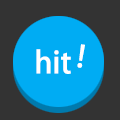
<style>
.page{position:relative;width:120px;height:120px;background:#333333}
.page>*{position:absolute;margin:0}
.t1{font:30px "AdobeHeitiStd-Regular";color:#ffffff}
</style>
<div class="page">
<p class="t1" style="left:36px;top:49px;width:35px;height:25px">hit</p>
<p class="t1" style="left:77px;top:44px;width:8px;height:24px;rotate:9deg">!</p>
</div>
